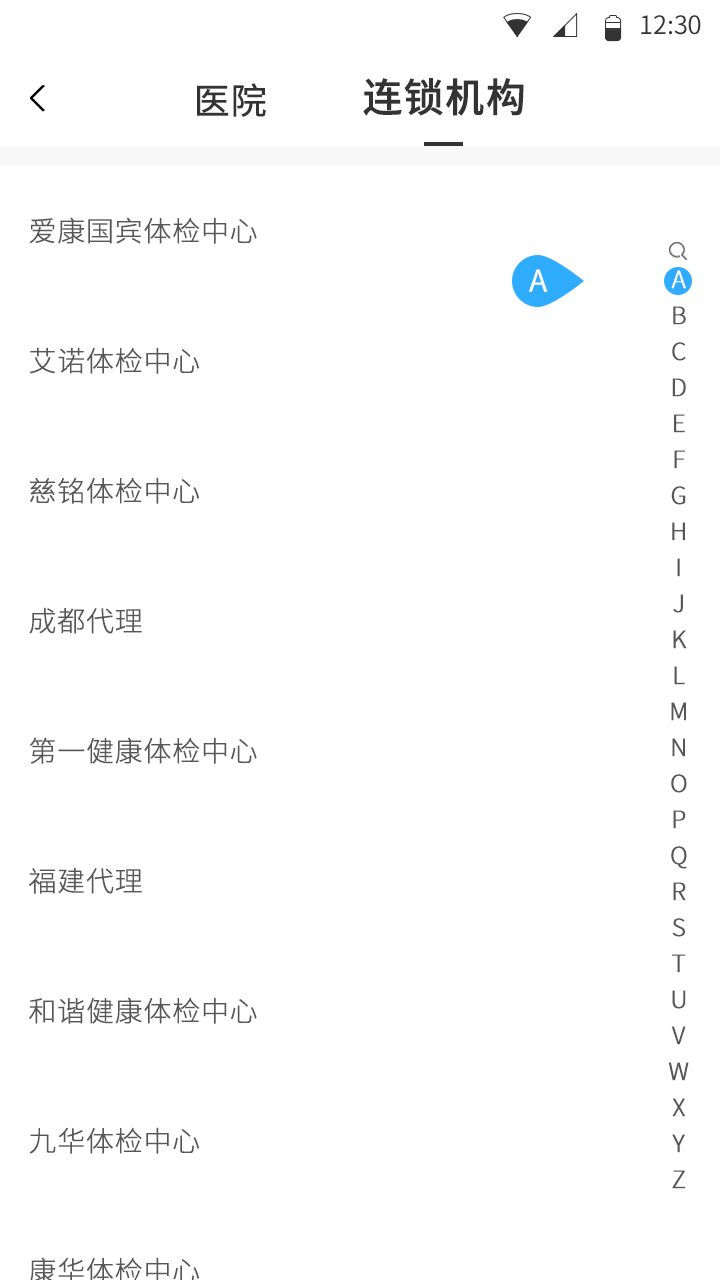
<style>
.page{position:relative;width:720px;height:1280px;background:#ffffff}
.page>*{position:absolute;margin:0}
.t1{font:25.4px "SourceHanSansCN-Normal";color:#333333}
.t2{font:40px "SourceHanSansCN-Medium";color:#333333;font-weight:bold}
.t3{font:36px "SourceHanSansCN-Regular";color:#333333;font-weight:bold}
.t4{font:28px "SourceHanSansCN-Light";color:#575757;font-weight:bold}
.t5{font:30px "SourceHanSansCN-Normal";color:#ffffff;font-weight:bold}
.t6{font:24px/36px "SourceHanSansCN-Light";color:#575757;font-weight:bold}
.t7{font:24px/36px "SourceHanSansCN-Light";color:#ffffff;font-weight:bold}
</style>
<div class="page">
<p class="t1" style="left:641px;top:15px;width:60px;height:20px">12:30</p>
<p class="t2" style="left:363px;top:78px;width:161px;height:38px">连锁机构</p>
<p class="t3" style="left:197px;top:83px;width:69px;height:34px">医院</p>
<p class="t4" style="left:29px;top:217px;width:228px;height:27px">爱康国宾体检中心</p>
<p class="t5" style="left:529px;top:269px;width:19px;height:23px">A</p>
<p class="t6" style="left:668px;top:270px;width:21px;height:919px;text-align:center"><span class="t7">A<br></span>B<br>C<br>D<br>E<br>F<br>G<br>H<br>I<br>J<br>K<br>L<br>M<br>N<br>O<br>P<br>Q<br>R<br>S<br>T<br>U<br>V<br>W<br>X<br>Y<br>Z</p>
<p class="t4" style="left:29px;top:347px;width:170px;height:27px">艾诺体检中心</p>
<p class="t4" style="left:30px;top:477px;width:169px;height:27px">慈铭体检中心</p>
<p class="t4" style="left:29px;top:607px;width:113px;height:27px">成都代理</p>
<p class="t4" style="left:30px;top:737px;width:227px;height:27px">第一健康体检中心</p>
<p class="t4" style="left:29px;top:868px;width:113px;height:26px">福建代理</p>
<p class="t4" style="left:29px;top:997px;width:228px;height:27px">和谐健康体检中心</p>
<p class="t4" style="left:29px;top:1127px;width:170px;height:27px">九华体检中心</p>
</div>
